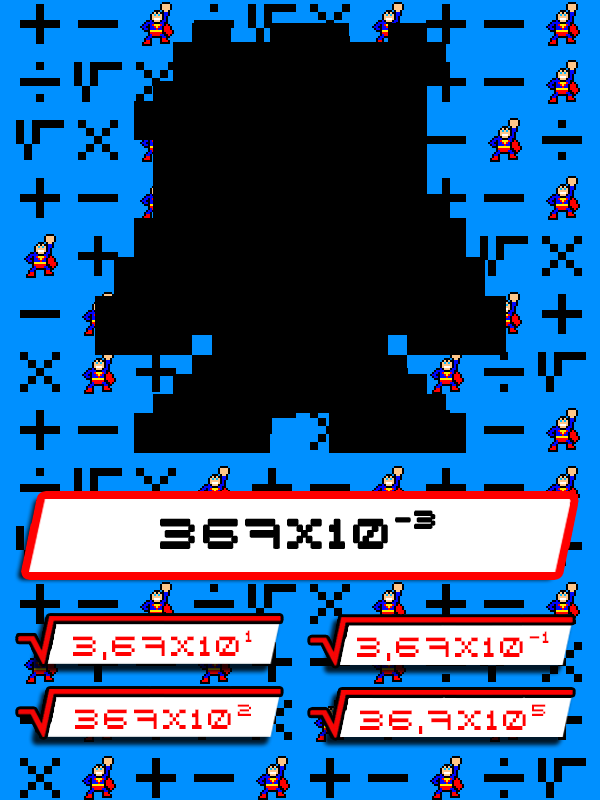
<style>
.page{position:relative;width:600px;height:800px;background:#0090ff}
.page>*{position:absolute;margin:0}
.t1{font:60px "Bit1";color:#000000}
.t2{font:41.8px "Bit1";color:#ff0000}
</style>
<div class="page">
<p class="t1" style="left:161px;top:511px;width:274px;height:37px">367x10-3</p>
<p class="t2" style="left:73px;top:630px;width:179px;height:30px">3,67x101</p>
<p class="t2" style="left:357px;top:631px;width:192px;height:30px">3,67x10-1</p>
<p class="t2" style="left:75px;top:704px;width:176px;height:25px">367x102</p>
<p class="t2" style="left:360px;top:704px;width:186px;height:30px">36,7x105</p>
</div>
